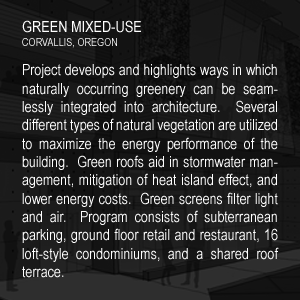
<style>
.page{position:relative;width:300px;height:300px}
.page>*{position:absolute;margin:0}
.t1{font:15.6px "ArialNarrow";color:#ffffff}
.t2{font:11.1px "ArialNarrow"}
.t3{font:15.3px "ArialNarrow";color:#ffffff}
</style>
<div class="page">
<p class="t1" style="left:22px;top:20px;width:119px;height:13px">GREEN MIXED-USE</p>
<p class="t2" style="left:22px;top:38px;width:95px;height:10px">CORVALLIS, OREGON</p>
<p class="t3" style="left:22px;top:64px;width:257px;height:214px;text-align:justify">Project develops and highlights ways in which naturally occurring greenery can be seamlessly integrated into architecture.  Several different types of natural vegetation are utilized to maximize the energy performance of the building.  Green roofs aid in stormwater management, mitigation of heat island effect, and lower energy costs.  Green screens filter light and air.  Program consists of subterranean parking, ground floor retail and restaurant, 16 loft-style condominiums, and a shared roof terrace.</p>
</div>
